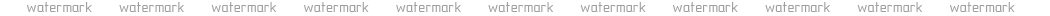
<style>
.page{position:relative;width:1050px;height:16px;background:#ffffff}
.page>*{position:absolute;margin:0}
.t1{font:14.4px "GOSTTypeA";color:#9f9f9f;scale:1.25 1}
</style>
<div class="page">
<p class="t1" style="left:27px;top:2px;width:988px;height:10px">watermark     watermark     watermark     watermark     watermark     watermark     watermark     watermark     watermark     watermark     watermark</p>
</div>
